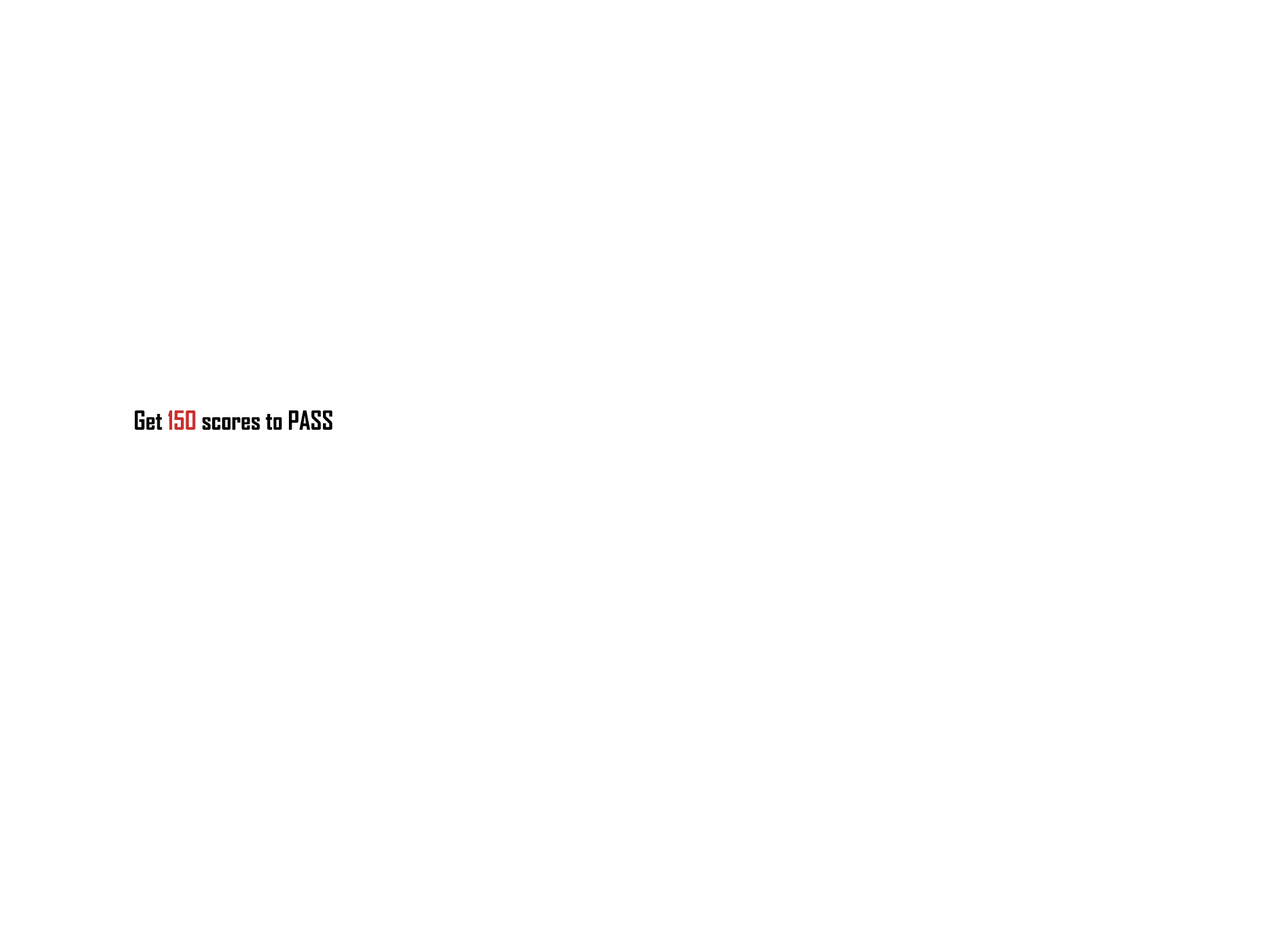
<style>
.page{position:relative;width:1261px;height:946px;background:#ffffff}
.page>*{position:absolute;margin:0}
.t1{font:25px "AgencyFB-Bold";color:#000000}
.t2{font:25px "AgencyFB-Bold";color:#cb2d2d}
</style>
<div class="page">
<p class="t1" style="left:135px;top:410px;width:197px;height:20px">Get <span class="t2">150</span> scores to PASS</p>
</div>
